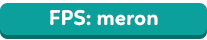
<style>
.page{position:relative;width:207px;height:40px;background:#0ca09c}
.page>*{position:absolute;margin:0}
.t1{font:22px "Linotte-Bold";color:#ffffff}
</style>
<div class="page">
<p class="t1" style="left:50px;top:9px;width:108px;height:17px">FPS: meron</p>
</div>
